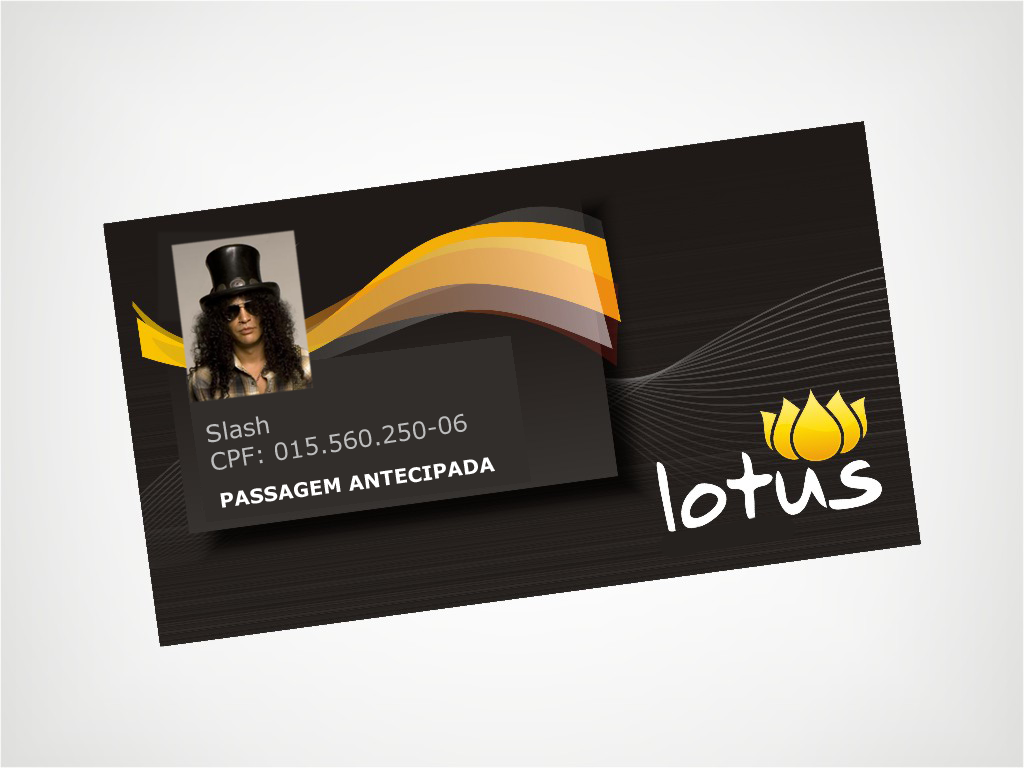
<style>
.page{position:relative;width:1024px;height:768px}
.page>*{position:absolute;margin:0}
.t1{font:24px "Verdana";color:#bcbcbc}
.t2{font:20px "Verdana-Bold";color:#ffffff}
</style>
<div class="page">
<p class="t1" style="left:206px;top:413px;width:261px;height:57px;rotate:-9deg">Slash<br>CPF: 015.560.250-06</p>
<p class="t2" style="left:220px;top:457px;width:275px;height:51px;rotate:-8deg">PASSAGEM ANTECIPADA</p>
</div>
